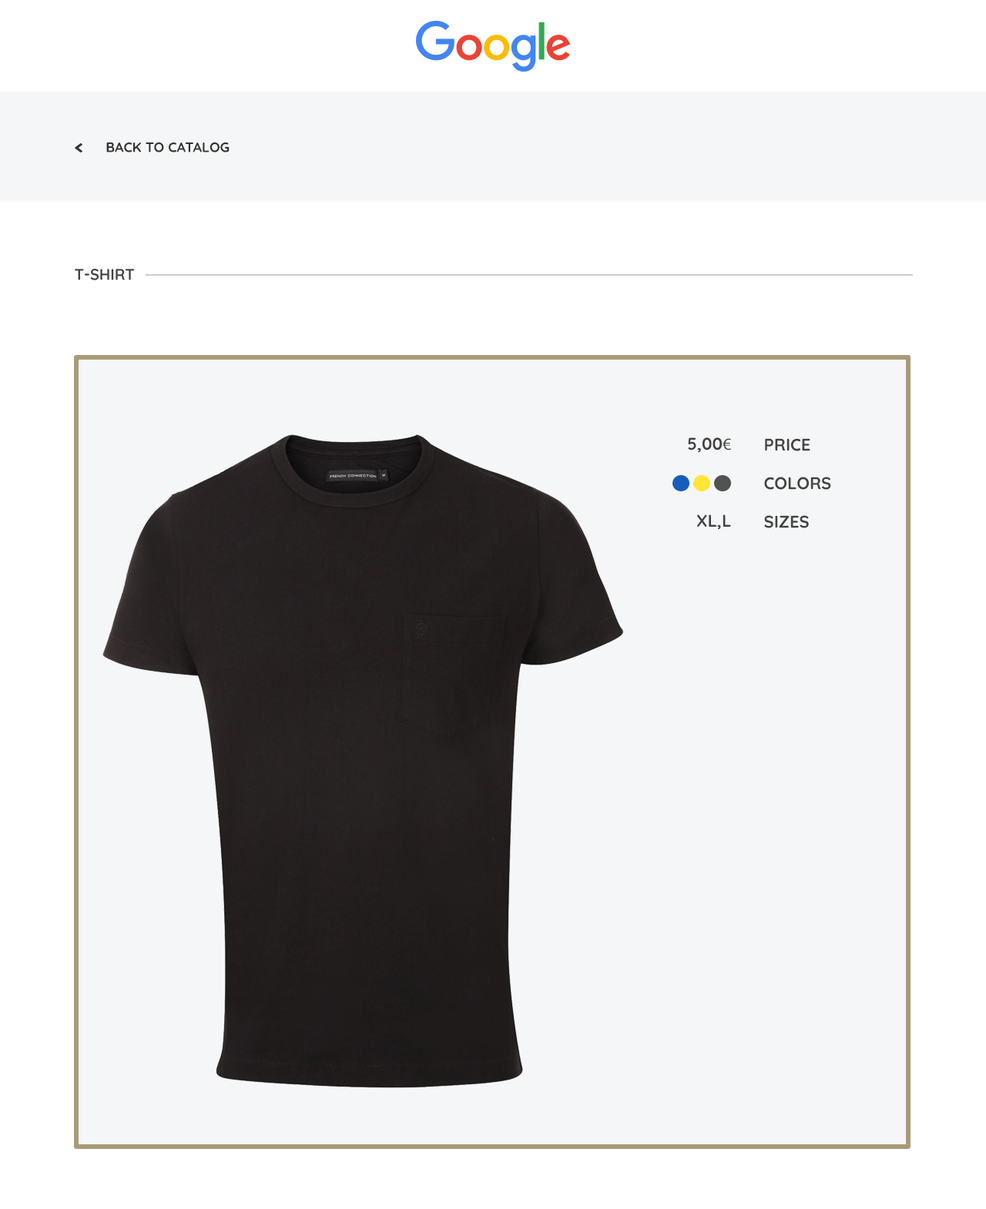
<style>
.page{position:relative;width:986px;height:1209px;background:#f5f6f7}
.page>*{position:absolute;margin:0}
.t1{font:13.9px "Quicksand-Bold";color:#333333;text-transform:uppercase}
.t2{font:15.4px "Quicksand-Bold";color:#424242;text-transform:uppercase}
.t3{font:16.9px/38.5px "Quicksand-Bold";color:#424242;text-transform:uppercase}
.t4{font:16.9px/38.5px "MyriadPro-Regular";color:#424242;text-transform:uppercase}
</style>
<div class="page">
<p class="t1" style="left:106px;top:142px;width:124px;height:11px">Back to catalog</p>
<p class="t2" style="left:75px;top:269px;width:60px;height:11px">t-shirt</p>
<p class="t3" style="left:688px;top:438px;width:43px;height:92px;text-align:right">5,00<span class="t4">€<br><br></span>XL,L</p>
<p class="t3" style="left:764px;top:438px;width:67px;height:90px">PRICE<br>COLORS<br>SIZES</p>
</div>
